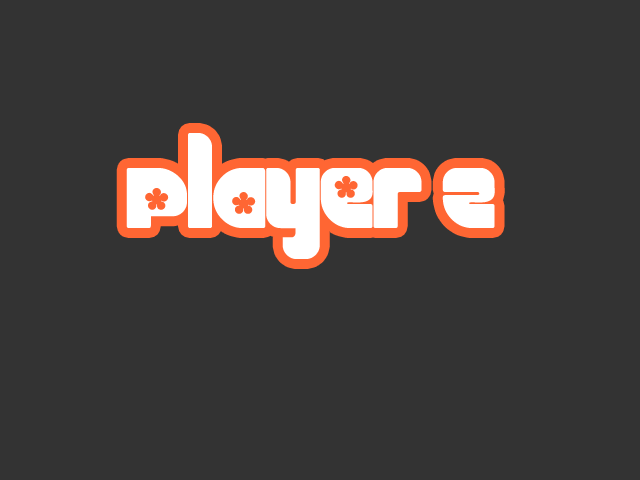
<style>
.page{position:relative;width:640px;height:480px;background:#333333}
.page>*{position:absolute;margin:0}
.t1{font:120px "Chick";color:#ffffff}
</style>
<div class="page">
<p class="t1" style="left:126px;top:133px;width:369px;height:126px">Player 2</p>
</div>
